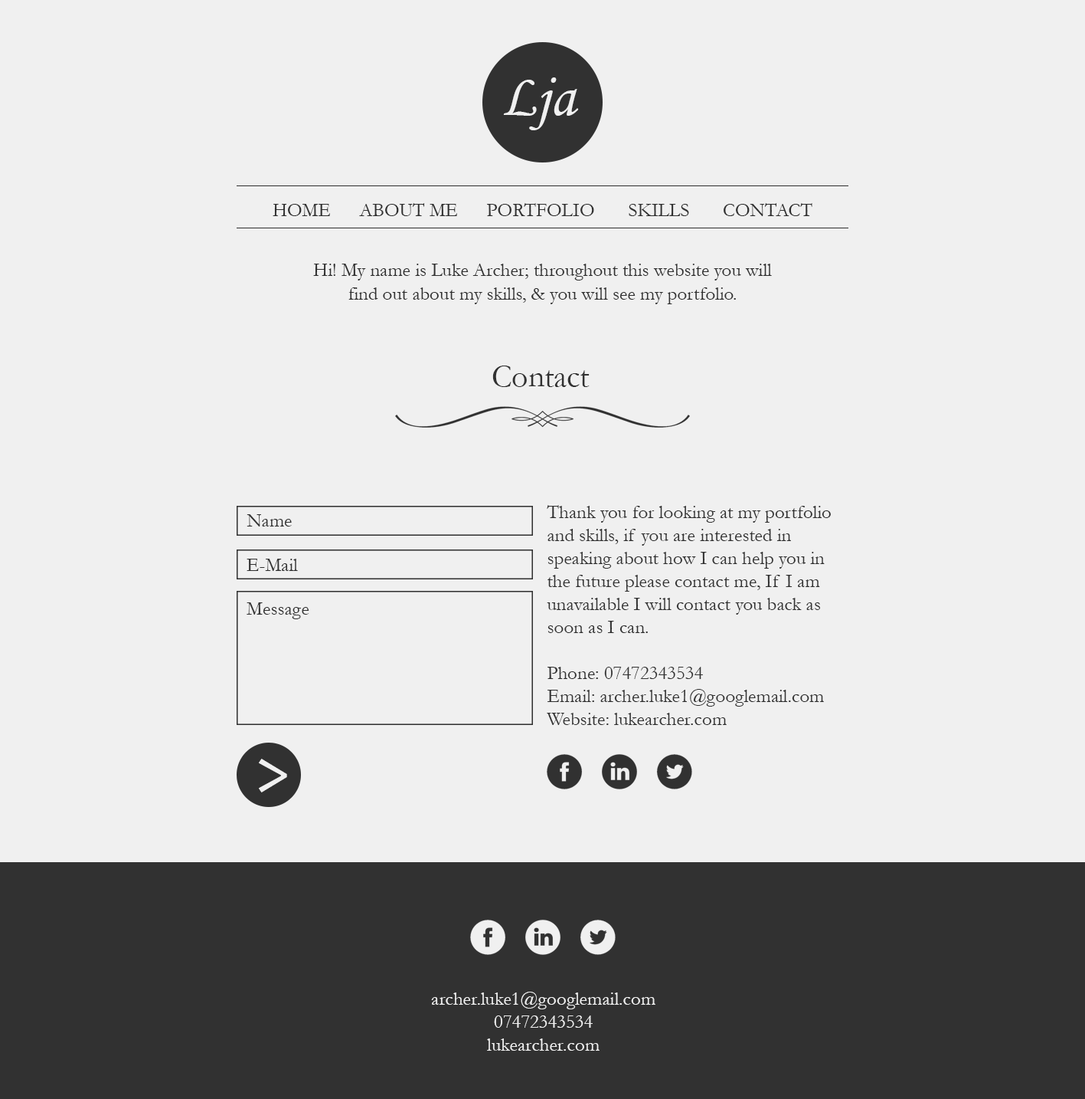
<style>
.page{position:relative;width:1085px;height:1099px;background:#f0f0f0}
.page>*{position:absolute;margin:0}
.t1{font:60.7px "MonotypeCorsiva";color:#f0f0f0}
.t2{font:19.2px "Garamond";color:#2f2f2f}
.t3{font:32px "Garamond";color:#313131}
.t4{font:19.2px "Garamond";color:#313131}
.t5{font:70.3px "Candara";color:#f0f0f0}
.t6{font:19.2px "Garamond";color:#f0f0f0}
</style>
<div class="page">
<p class="t1" style="left:503px;top:77px;width:76px;height:53px">Lja</p>
<p class="t2" style="left:273px;top:203px;width:540px;height:13px">HOME      ABOUT ME      PORTFOLIO       SKILLS       CONTACT</p>
<p class="t2" style="left:313px;top:264px;width:459px;height:40px;text-align:center">Hi! My name is Luke Archer; throughout this website you will find out about my skills, &amp; you will see my portfolio.</p>
<p class="t3" style="left:493px;top:365px;width:97px;height:22px">Contact</p>
<p class="t4" style="left:547px;top:505px;width:284px;height:220px">Thank you for looking at my portfolio and skills, if you are interested in speaking about how I can help you in the future please contact me, If I am unavailable I will contact you back as soon as I can.<br><br>Phone: 07472343534<br>Email: archer.luke1@googlemail.com<br>Website: lukearcher.com</p>
<p class="t4" style="left:247px;top:514px;width:45px;height:12px">Name</p>
<p class="t4" style="left:247px;top:558px;width:51px;height:13px">E-Mail</p>
<p class="t4" style="left:247px;top:602px;width:62px;height:17px">Message</p>
<p class="t5" style="left:259px;top:758px;width:28px;height:34px">&gt;</p>
<p class="t6" style="left:431px;top:991px;width:225px;height:59px;text-align:center">archer.luke1@googlemail.com<br>07472343534<br>lukearcher.com</p>
</div>
